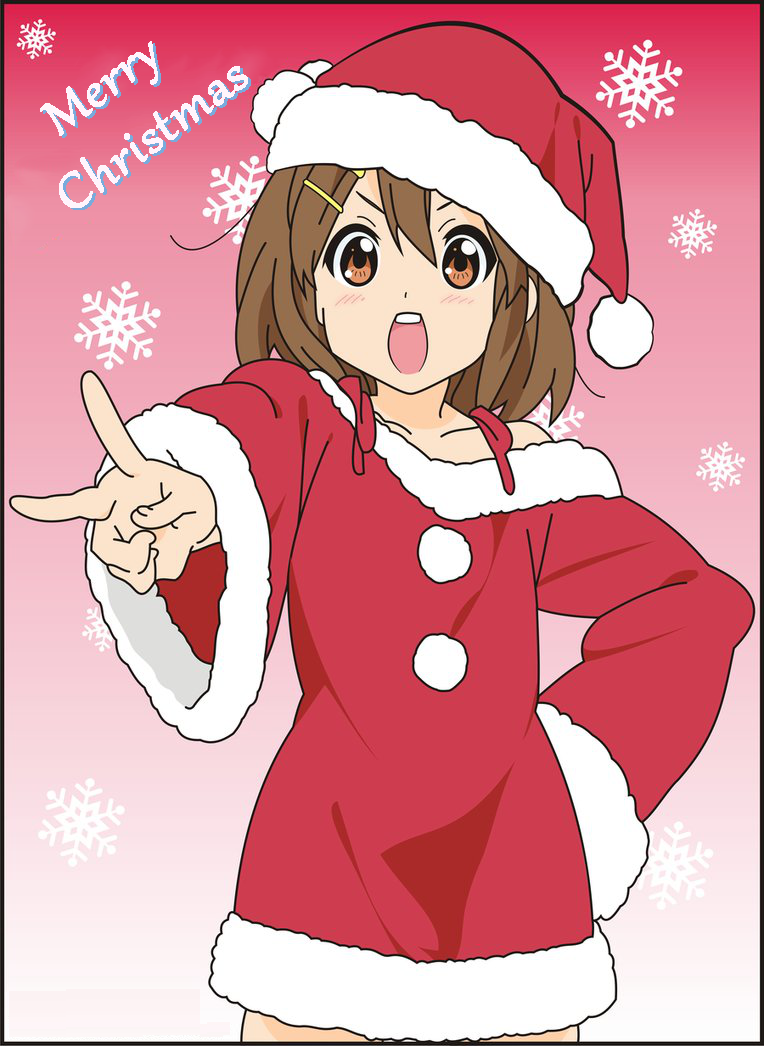
<style>
.page{position:relative;width:764px;height:1046px}
.page>*{position:absolute;margin:0}
.t1{font:58.3px "Gabriola";color:#fff4fc;font-weight:bold;scale:1.13 1}
.t2{font:58.3px "Gabriola";font-weight:bold;scale:1.13 1}
</style>
<div class="page">
<p class="t1" style="left:40px;top:41px;width:208px;height:167px;rotate:-37deg">Merry <br>Christmas</p>
<p class="t2" style="left:43px;top:43px;width:208px;height:167px;rotate:-37deg">Merry <br>Christmas</p>
</div>
